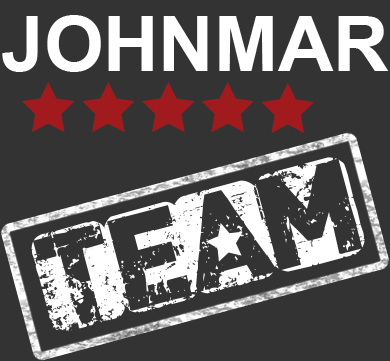
<style>
.page{position:relative;width:390px;height:361px;background:#333333}
.page>*{position:absolute;margin:0}
.t1{font:76.6px "Arial-BoldMT";color:#ffffff}
.t2{font:118.6px "CFPunkisnotDead-Regular";color:#ffffff}
</style>
<div class="page">
<p class="t1" style="left:2px;top:15px;width:387px;height:57px">JOHNMAR</p>
<p class="t2" style="left:31px;top:157px;width:334px;height:175px;rotate:-15deg">team</p>
</div>
